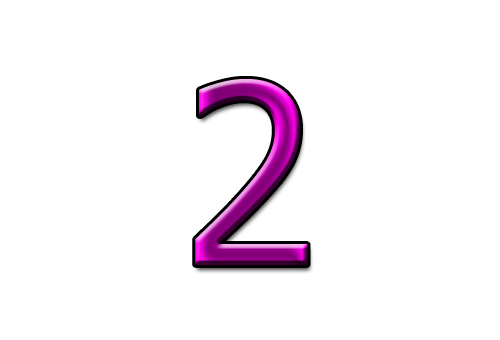
<style>
.page{position:relative;width:500px;height:340px;background:#ffffff}
.page>*{position:absolute;margin:0}
.t1{font:250px "Tahoma"}
</style>
<div class="page">
<p class="t1" style="left:195px;top:78px;width:113px;height:187px">2</p>
</div>
